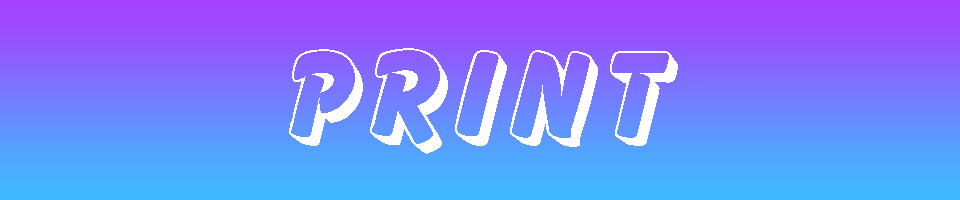
<style>
.page{position:relative;width:960px;height:200px}
.page>*{position:absolute;margin:0}
.t1{font:144px "BalloonDroShaD";letter-spacing:0.05em;color:#ffffff;text-transform:uppercase}
</style>
<div class="page">
<p class="t1" style="left:289px;top:48px;width:389px;height:106px">print</p>
</div>
